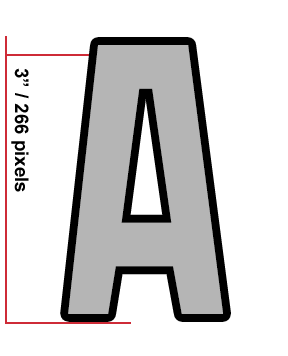
<style>
.page{position:relative;width:288px;height:356px;background:#ffffff}
.page>*{position:absolute;margin:0}
.t1{font:18.7px "Arial-BoldMT";color:#000000}
</style>
<div class="page">
<p class="t1" style="left:11px;top:68px;width:18px;height:124px;rotate:90deg">3” / 266 pixels</p>
</div>
